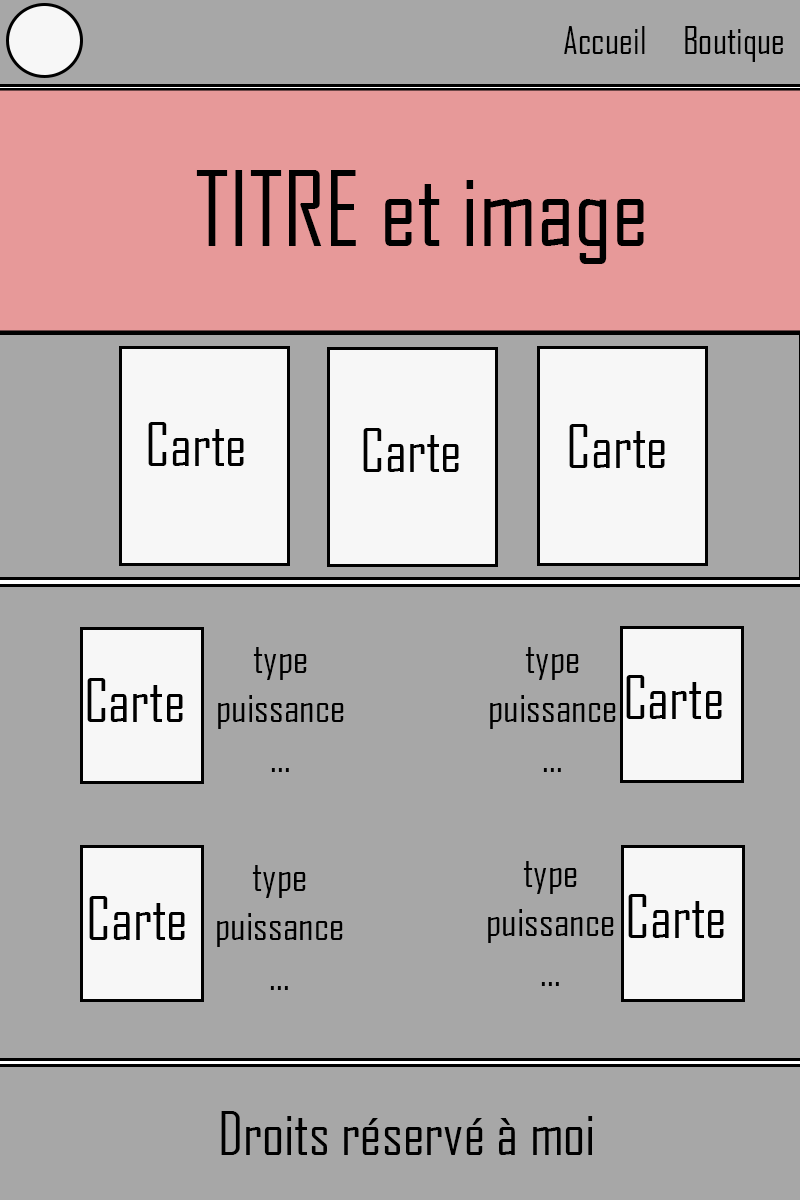
<style>
.page{position:relative;width:800px;height:1200px;background:#a7a7a7}
.page>*{position:absolute;margin:0}
.t1{font:37.2px "AgencyFB-Reg";color:#000000}
.t2{font:99.2px "AgencyFB-Reg";color:#000000}
.t3{font:57.9px "AgencyFB-Reg";color:#000000}
.t4{font:41.3px "AgencyFB-Reg";color:#000000}
</style>
<div class="page">
<p class="t1" style="left:564px;top:26px;width:219px;height:36px">Accueil     Boutique</p>
<p class="t2" style="left:196px;top:170px;width:448px;height:94px">TITRE et image</p>
<p class="t3" style="left:148px;top:422px;width:96px;height:44px">Carte</p>
<p class="t3" style="left:569px;top:424px;width:96px;height:44px">Carte</p>
<p class="t3" style="left:363px;top:428px;width:96px;height:44px">Carte</p>
<p class="t4" style="left:218px;top:647px;width:126px;height:125px;text-align:center">type<br>puissance<br>...</p>
<p class="t4" style="left:490px;top:647px;width:126px;height:125px;text-align:center">type<br>puissance<br>...</p>
<p class="t3" style="left:87px;top:678px;width:96px;height:44px">Carte</p>
<p class="t3" style="left:626px;top:675px;width:96px;height:44px">Carte</p>
<p class="t4" style="left:217px;top:865px;width:126px;height:125px;text-align:center">type<br>puissance<br>...</p>
<p class="t4" style="left:488px;top:861px;width:126px;height:125px;text-align:center">type<br>puissance<br>...</p>
<p class="t3" style="left:628px;top:894px;width:96px;height:44px">Carte</p>
<p class="t3" style="left:89px;top:896px;width:96px;height:44px">Carte</p>
<p class="t3" style="left:221px;top:1111px;width:372px;height:44px">Droits réservé à moi</p>
</div>
